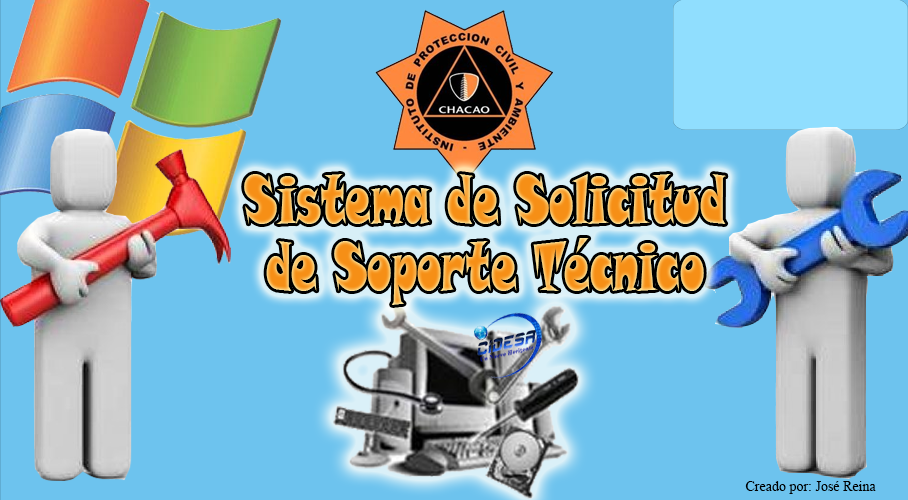
<style>
.page{position:relative;width:908px;height:500px;background:#6dc3ee}
.page>*{position:absolute;margin:0}
.t1{font:67.3px/67.3px "SnapITC-Regular";scale:0.6 1}
.t2{font:14px "TimesNewRomanPSMT";color:#010101}
</style>
<div class="page">
<p class="t1" style="left:244px;top:174px;width:482px;height:131px;text-align:center">Sistema de Solicitud de Soporte Técnico</p>
<p class="t2" style="left:745px;top:481px;width:131px;height:13px">Creado por: José Reina</p>
</div>
